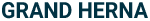
<style>
.page{position:relative;width:150px;height:21px;background:#ffffff}
.page>*{position:absolute;margin:0}
.t1{font:22.2px "Roboto-Bold";color:#013243;scale:0.96 1}
</style>
<div class="page">
<p class="t1" style="left:2px;top:2px;width:146px;height:17px">GRAND HERNA</p>
</div>
